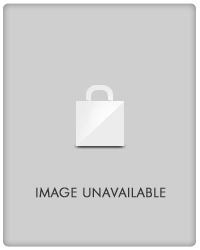
<style>
.page{position:relative;width:200px;height:250px;background:#cfcfcf}
.page>*{position:absolute;margin:0}
.t1{font:13px "FuturaBT-Light";letter-spacing:0.025em;color:#363636;text-transform:uppercase;font-weight:bold}
</style>
<div class="page">
<p class="t1" style="left:36px;top:187px;width:130px;height:11px">image unavailable</p>
</div>
